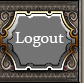
<style>
.page{position:relative;width:84px;height:83px;background:#737373}
.page>*{position:absolute;margin:0}
.t1{font:16px "Constantia";color:#ffffff}
</style>
<div class="page">
<p class="t1" style="left:15px;top:32px;width:49px;height:15px">Logout</p>
</div>
